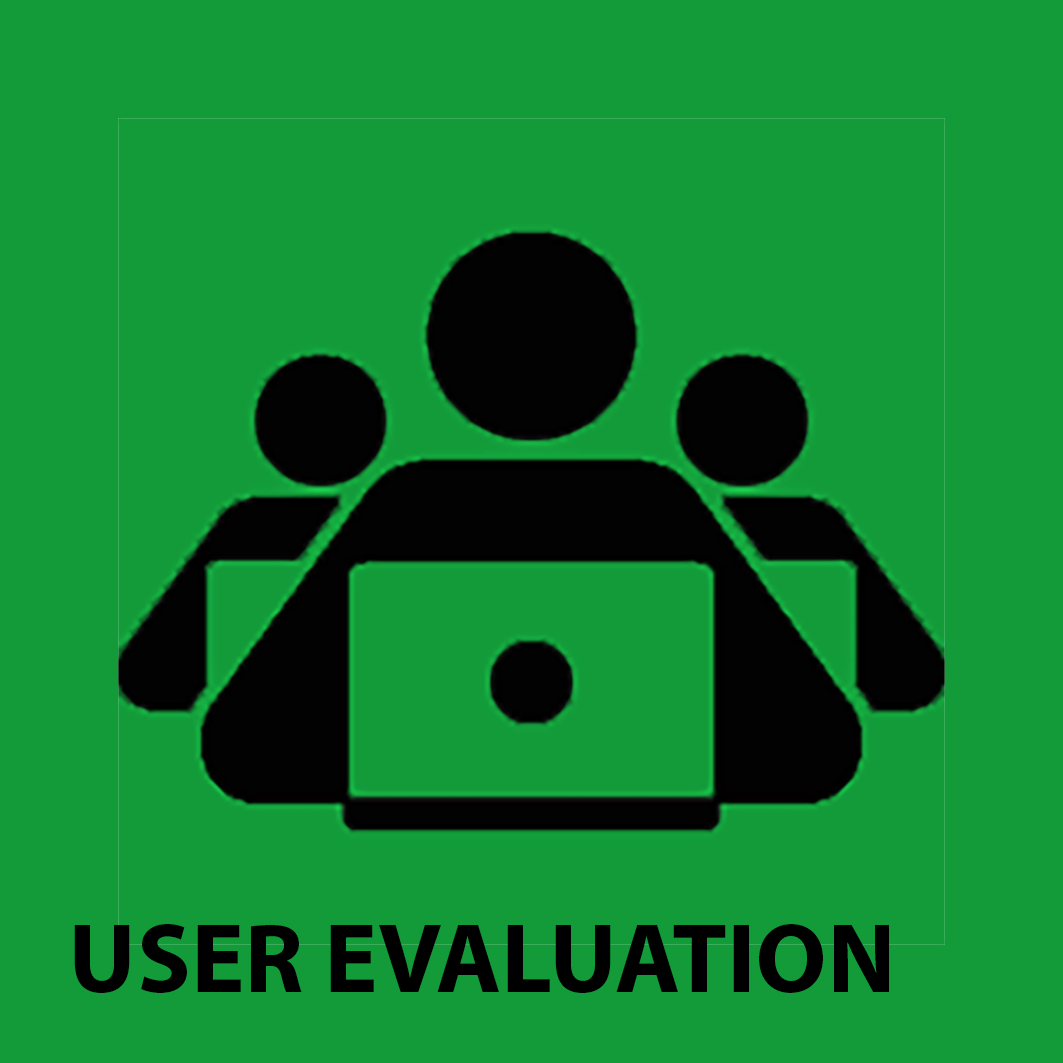
<style>
.page{position:relative;width:1063px;height:1063px;background:#139b3a}
.page>*{position:absolute;margin:0}
.t1{font:100px "MyriadPro-Bold";color:#000000}
</style>
<div class="page">
<p class="t1" style="left:74px;top:924px;width:815px;height:69px">USER EVALUATION</p>
</div>
